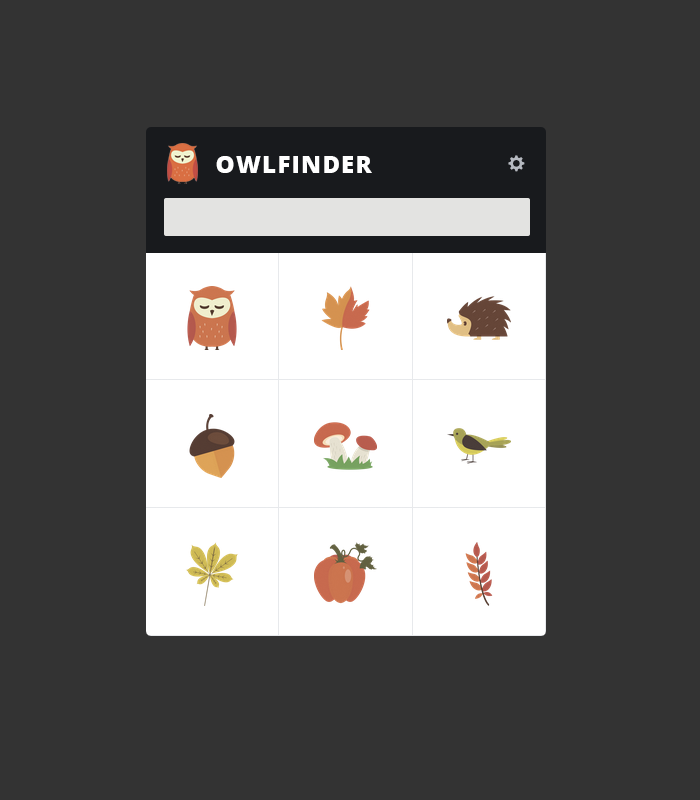
<style>
.page{position:relative;width:700px;height:800px;background:#333333}
.page>*{position:absolute;margin:0}
.t1{font:24px "OpenSans-Extrabold";letter-spacing:0.05em;color:#ffffff}
</style>
<div class="page">
<p class="t1" style="left:216px;top:156px;width:156px;height:17px">OWLFINDER</p>
</div>
